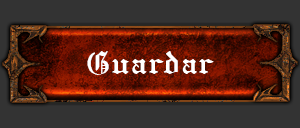
<style>
.page{position:relative;width:300px;height:128px;background:#333333}
.page>*{position:absolute;margin:0}
.t1{font:30px "SWGothe";color:#ffffff}
</style>
<div class="page">
<p class="t1" style="left:87px;top:51px;width:127px;height:24px">Guardar</p>
</div>
